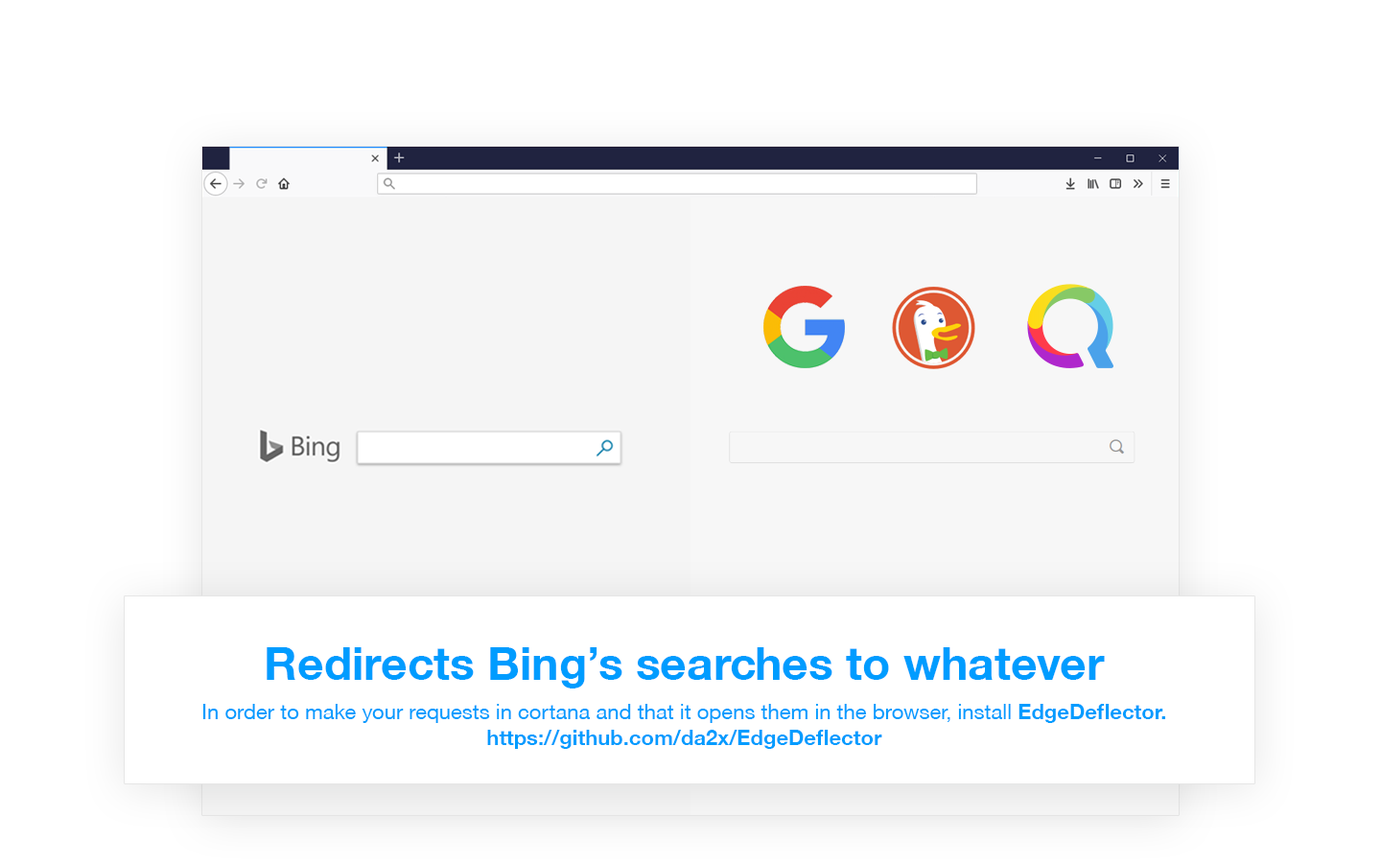
<style>
.page{position:relative;width:1381px;height:863px;background:#ffffff}
.page>*{position:absolute;margin:0}
.t1{font:46px "HelveticaNeueCE-Bold";color:#009cff}
.t2{font:21.1px "HelveticaNeueCE-Roman";color:#009cff}
.t3{font:21.1px "HelveticaNeueCE-Bold";color:#009cff}
</style>
<div class="page">
<p class="t1" style="left:267px;top:647px;width:838px;height:42px">Redirects Bing’s searches to whatever</p>
<p class="t2" style="left:202px;top:704px;width:963px;height:45px;text-align:center">In order to make your requests in cortana and that it opens them in the browser, install <span class="t3">EdgeDeflector.<br>https://github.com/da2x/EdgeDeflector</span></p>
</div>
